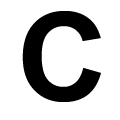
<style>
.page{position:relative;width:120px;height:120px;background:#ffffff}
.page>*{position:absolute;margin:0}
.t1{font:125px "Arial-BoldMT";color:#000000}
</style>
<div class="page">
<p class="t1" style="left:22px;top:11px;width:79px;height:91px">C</p>
</div>
